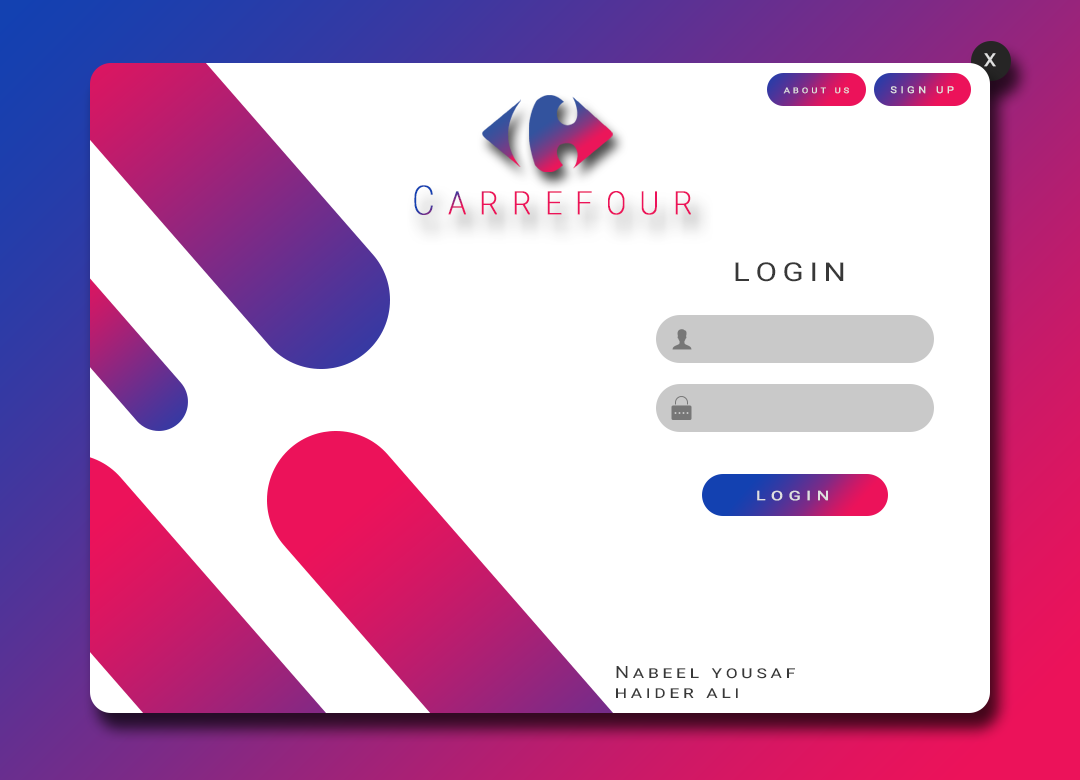
<style>
.page{position:relative;width:1080px;height:780px;background:#ffffff}
.page>*{position:absolute;margin:0}
.t1{font:18px "Roboto-Regular";letter-spacing:0.3em;color:#e0e0e0;font-weight:bold;scale:1.05 1}
.t2{font:7.9px "Roboto-Regular";letter-spacing:0.3em;color:#e0e0e0;text-transform:uppercase;font-weight:bold;scale:1.19 1}
.t3{font:9.4px "Roboto-Regular";letter-spacing:0.3em;color:#e0e0e0;text-transform:uppercase;font-weight:bold;scale:1.17 1}
.t4{font:40px "Roboto-Thin";letter-spacing:0.38em;color:#ec125a;font-variant:small-caps;font-weight:bold;scale:0.85 1}
.t5{font:26px "Roboto-Regular";letter-spacing:0.18em;color:#383838;text-transform:uppercase;scale:1.2 1}
.t6{font:13px "Roboto-Regular";letter-spacing:0.3em;color:#e0e0e0;text-transform:uppercase;font-weight:bold;scale:1.34 1}
.t7{font:16.9px "Roboto-Regular";letter-spacing:0.18em;color:#383838;font-variant:small-caps;scale:1.2 1}
</style>
<div class="page">
<p class="t1" style="left:984px;top:53px;width:12px;height:14px">X</p>
<p class="t2" style="left:783px;top:87px;width:66px;height:7px">About Us</p>
<p class="t3" style="left:890px;top:86px;width:64px;height:8px">sign up</p>
<p class="t4" style="left:414px;top:185px;width:277px;height:30px">Carrefour</p>
<p class="t5" style="left:735px;top:262px;width:109px;height:20px">login</p>
<p class="t6" style="left:757px;top:490px;width:71px;height:11px">login</p>
<p class="t7" style="left:616px;top:666px;width:179px;height:32px">Nabeel yousaf<br>haider ali</p>
</div>
